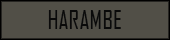
<style>
.page{position:relative;width:170px;height:40px;background:#514f47}
.page>*{position:absolute;margin:0}
.t1{font:25.3px "AgencyFB-Reg";color:#191919;text-transform:uppercase}
</style>
<div class="page">
<p class="t1" style="left:48px;top:10px;width:73px;height:19px">HARAMBE</p>
</div>
